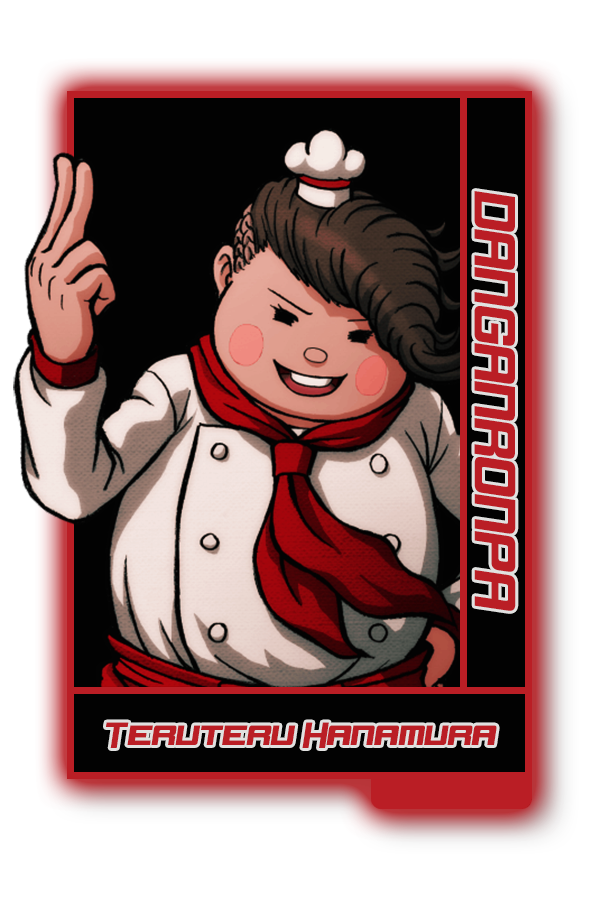
<style>
.page{position:relative;width:600px;height:900px;background:#ffffff}
.page>*{position:absolute;margin:0}
.t1{font:48.8px "DorBlue";color:#bb2c2e}
.t2{font:30.8px "DorBlue";color:#bb2c2e}
</style>
<div class="page">
<p class="t1" style="left:474px;top:191px;width:42px;height:420px;rotate:90deg">DANGANRONPA</p>
<p class="t2" style="left:106px;top:722px;width:391px;height:26px">Teruteru Hanamura</p>
</div>
